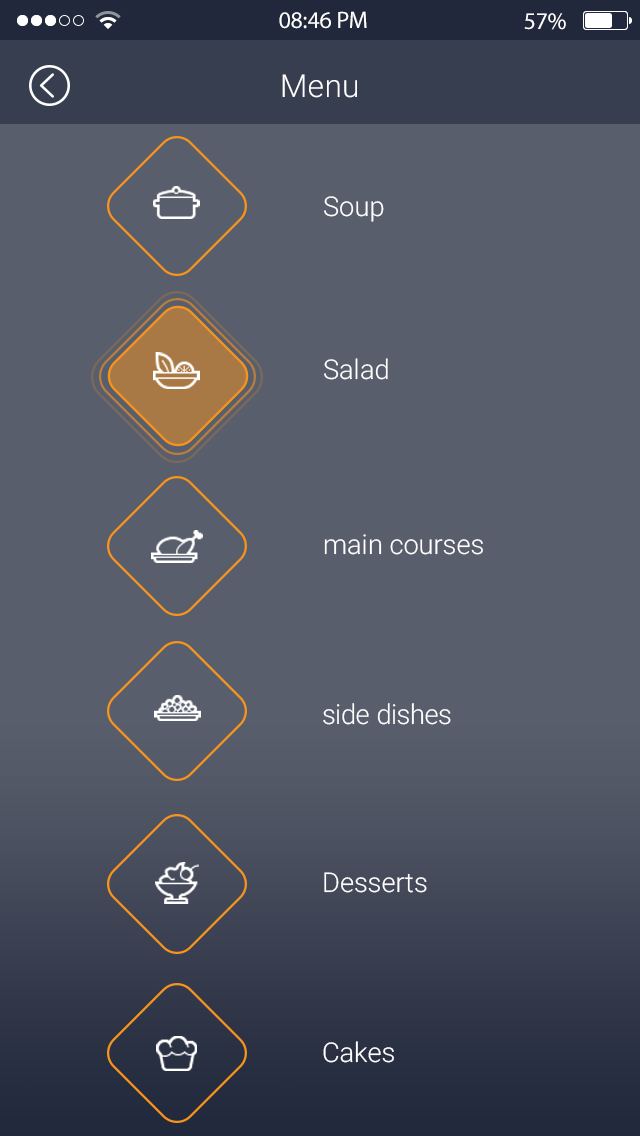
<style>
.page{position:relative;width:640px;height:1136px;background:#595e6c}
.page>*{position:absolute;margin:0}
.t1{font:24px "MyriadPro-Regular";color:#fefeff}
.t2{font:24px "MyriadPro-Regular";color:#ffffff}
.t3{font:31.7px "Roboto-Light";letter-spacing:0.01em;color:#ffffff}
.t4{font:27.2px "Roboto-Light";color:#ffffff}
.t5{font:27.4px "Roboto-Light";color:#ffffff}
</style>
<div class="page">
<p class="t1" style="left:279px;top:11px;width:88px;height:18px">08:46 PM</p>
<p class="t2" style="left:524px;top:13px;width:42px;height:17px">57%</p>
<p class="t3" style="left:282px;top:74px;width:75px;height:24px">Menu</p>
<p class="t4" style="left:324px;top:196px;width:60px;height:26px">Soup</p>
<p class="t4" style="left:324px;top:358px;width:64px;height:22px">Salad</p>
<p class="t4" style="left:324px;top:534px;width:159px;height:21px">main courses</p>
<p class="t5" style="left:323px;top:703px;width:128px;height:22px">side dishes</p>
<p class="t4" style="left:324px;top:872px;width:103px;height:21px">Desserts</p>
<p class="t4" style="left:323px;top:1041px;width:71px;height:22px">Cakes</p>
</div>
